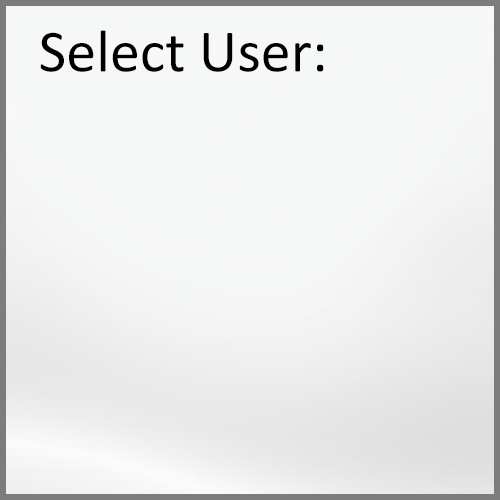
<style>
.page{position:relative;width:500px;height:500px;background:#f6f7f7}
.page>*{position:absolute;margin:0}
.t1{font:60px "Calibri";color:#000000}
</style>
<div class="page">
<p class="t1" style="left:40px;top:30px;width:284px;height:42px">Select User:</p>
</div>
